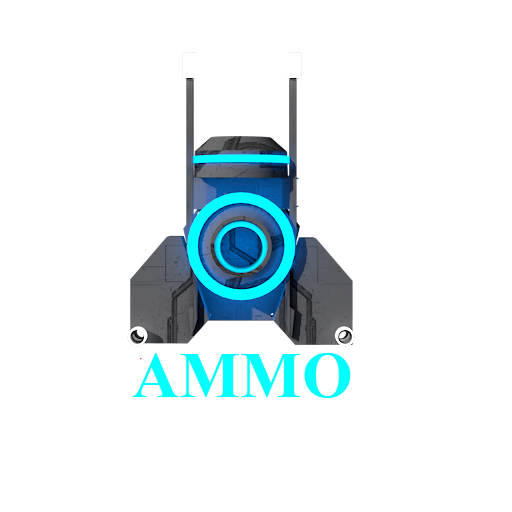
<style>
.page{position:relative;width:512px;height:512px;background:#ffffff}
.page>*{position:absolute;margin:0}
.t1{font:65px "TimesNewRomanPS-BoldMT";color:#00ffff}
</style>
<div class="page">
<p class="t1" style="left:132px;top:353px;width:219px;height:45px">AMMO</p>
</div>
